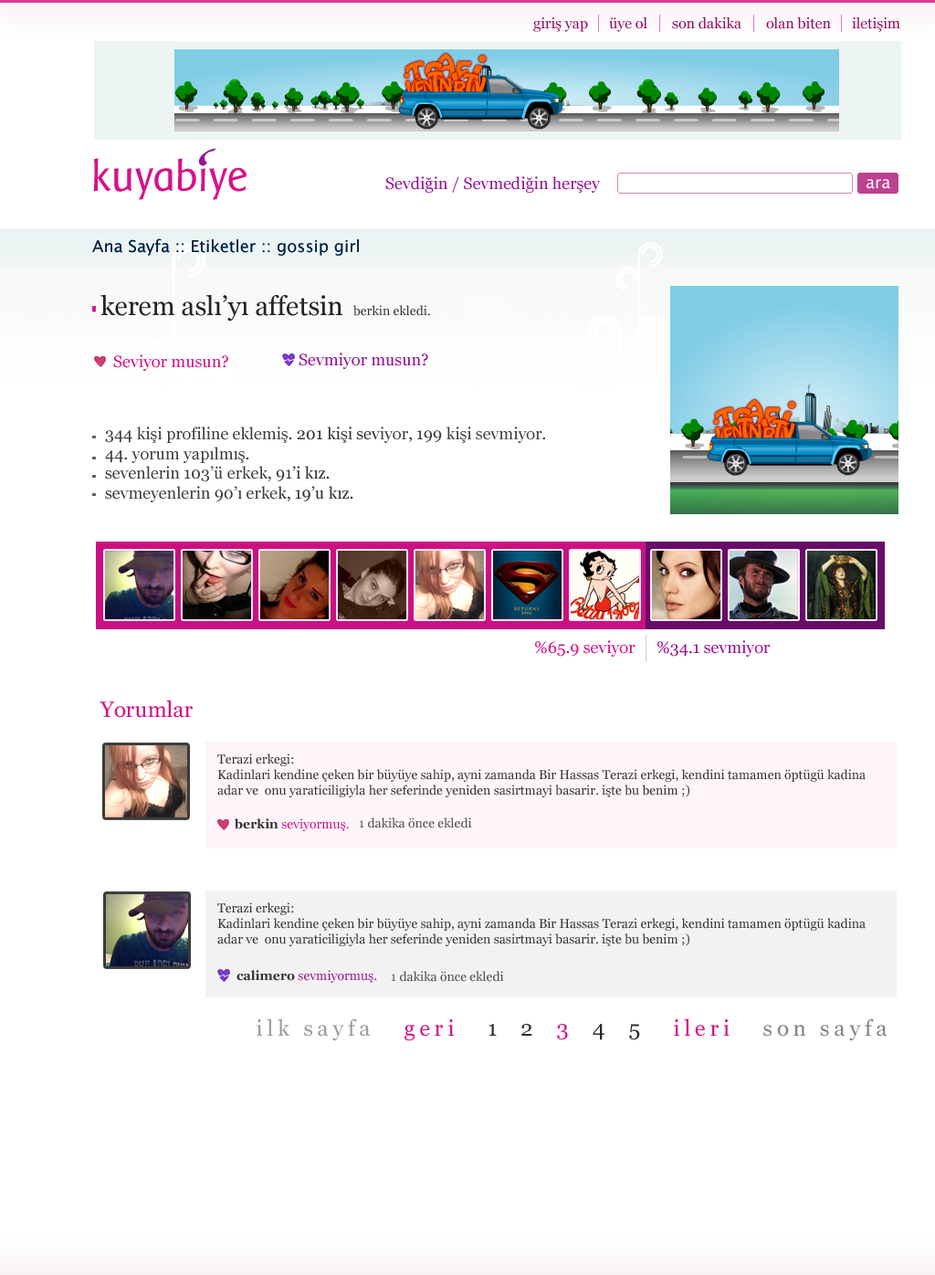
<style>
.page{position:relative;width:935px;height:1275px;background:#ffffff}
.page>*{position:absolute;margin:0}
.t1{font:14.6px "Georgia";color:#980e62}
.t2{font:44.7px "BaarSophia";color:#d51289}
.t3{font:16.4px "Georgia";color:#971298}
.t4{font:16.4px "LucidaSans";color:#ffffff}
.t5{font:16.4px "LucidaSans";color:#0a1b2e}
.t6{font:26.7px "Georgia";color:#232323}
.t7{font:12.8px "Georgia";color:#363636}
.t8{font:16.4px "Georgia";color:#d51289}
.t9{font:16.4px "Georgia";color:#363636}
.t10{font:21.9px "Georgia";color:#d51289}
.t11{font:12.8px "Georgia";color:#d51289}
.t12{font:12.8px "Georgia-Bold";color:#363636}
.t13{font:12.8px "Georgia";color:#505050}
.t14{font:12.8px "Georgia";color:#971298}
.t15{font:21.9px "Georgia";letter-spacing:0.2em;color:#9d9d9d}
.t16{font:21.9px "Georgia";letter-spacing:0.2em;color:#2a2a2a}
.t17{font:21.9px "Georgia";letter-spacing:0.2em;color:#d51289}
.t18{font:21.9px "Georgia";letter-spacing:0.2em;color:#858585}
</style>
<div class="page">
<p class="t1" style="left:533px;top:17px;width:368px;height:15px">giriş yap      üye ol       son dakika       olan biten      iletişim</p>
<p class="t2" style="left:93px;top:158px;width:155px;height:42px">kuyabiye</p>
<p class="t3" style="left:385px;top:176px;width:215px;height:17px">Sevdiğin / Sevmediğin herşey</p>
<p class="t4" style="left:867px;top:179px;width:23px;height:10px">ara</p>
<p class="t5" style="left:92px;top:238px;width:267px;height:18px">Ana Sayfa :: Etiketler :: gossip girl</p>
<p class="t6" style="left:100px;top:295px;width:242px;height:26px">kerem aslı’yı affetsin</p>
<p class="t7" style="left:353px;top:305px;width:77px;height:11px">berkin ekledi.</p>
<p class="t3" style="left:299px;top:353px;width:129px;height:16px">Sevmiyor musun?</p>
<p class="t8" style="left:113px;top:354px;width:115px;height:17px">Seviyor musun?</p>
<p class="t9" style="left:105px;top:427px;width:440px;height:75px">344 kişi profiline eklemiş. 201 kişi seviyor, 199 kişi sevmiyor.<br>44. yorum yapılmış.<br>sevenlerin 103’ü erkek, 91’i kız.<br>sevmeyenlerin 90’ı erkek, 19’u kız.</p>
<p class="t8" style="left:535px;top:640px;width:101px;height:17px">%65.9 seviyor</p>
<p class="t3" style="left:658px;top:640px;width:113px;height:17px">%34.1 sevmiyor</p>
<p class="t10" style="left:100px;top:700px;width:93px;height:18px">Yorumlar</p>
<p class="t7" style="left:217px;top:753px;width:649px;height:44px">Terazi erkegi: <br>Kadinlari kendine çeken bir büyüye sahip, ayni zamanda Bir Hassas Terazi erkegi, kendini tamamen öptügü kadina <br>adar ve  onu yaraticiligiyla her seferinde yeniden sasirtmayi basarir. işte bu benim ;)</p>
<p class="t11" style="left:234px;top:818px;width:115px;height:13px"><span class="t12">berkin </span>seviyormuş.</p>
<p class="t13" style="left:359px;top:817px;width:113px;height:11px">1 dakika önce ekledi</p>
<p class="t7" style="left:217px;top:902px;width:649px;height:44px">Terazi erkegi: <br>Kadinlari kendine çeken bir büyüye sahip, ayni zamanda Bir Hassas Terazi erkegi, kendini tamamen öptügü kadina <br>adar ve  onu yaraticiligiyla her seferinde yeniden sasirtmayi basarir. işte bu benim ;)</p>
<p class="t14" style="left:237px;top:970px;width:140px;height:13px"><span class="t12">calimero </span>sevmiyormuş.</p>
<p class="t13" style="left:391px;top:971px;width:113px;height:11px">1 dakika önce ekledi</p>
<p class="t15" style="left:257px;top:1018px;width:630px;height:23px"><span class="t16"> </span>ilk sayfa   <span class="t17">geri</span><span class="t16">   1  2  </span><span class="t17">3</span><span class="t16">  4  5   </span><span class="t17">ileri   </span><span class="t18">son sayfa</span></p>
</div>
